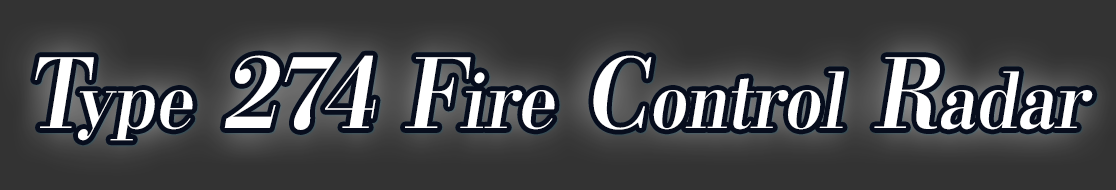
<style>
.page{position:relative;width:1116px;height:190px;background:#333333}
.page>*{position:absolute;margin:0}
.t1{font:76.8px "KochoStd-Heavy";color:#ffffff;font-style:italic;scale:0.9 1}
.t2{font:96px "KochoStd-Heavy";color:#ffffff;font-style:italic;scale:0.9 1}
</style>
<div class="page">
<p class="t1" style="left:35px;top:55px;width:1058px;height:86px"><span class="t2">T</span>ype<span class="t2"> 274 F</span>ire<span class="t2"> C</span>ontrol<span class="t2"> R</span>adar</p>
</div>
